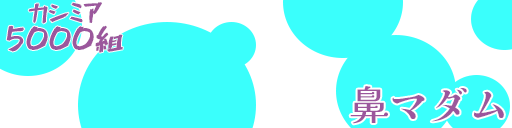
<style>
.page{position:relative;width:512px;height:128px;background:#3afffc}
.page>*{position:absolute;margin:0}
.t1{font:25px "851CHIKARA-DZUYOKU-KANA-B";color:#9b579c}
.t2{font:30px "851CHIKARA-DZUYOKU-KANA-B";color:#9b579c}
.t3{font:40px "KaiseiTokumin-Medium";color:#9b579c}
</style>
<div class="page">
<p class="t1" style="left:28px;top:2px;width:74px;height:22px">カシミア</p>
<p class="t2" style="left:6px;top:25px;width:117px;height:28px">5000組</p>
<p class="t3" style="left:350px;top:86px;width:154px;height:38px">鼻マダム</p>
</div>
